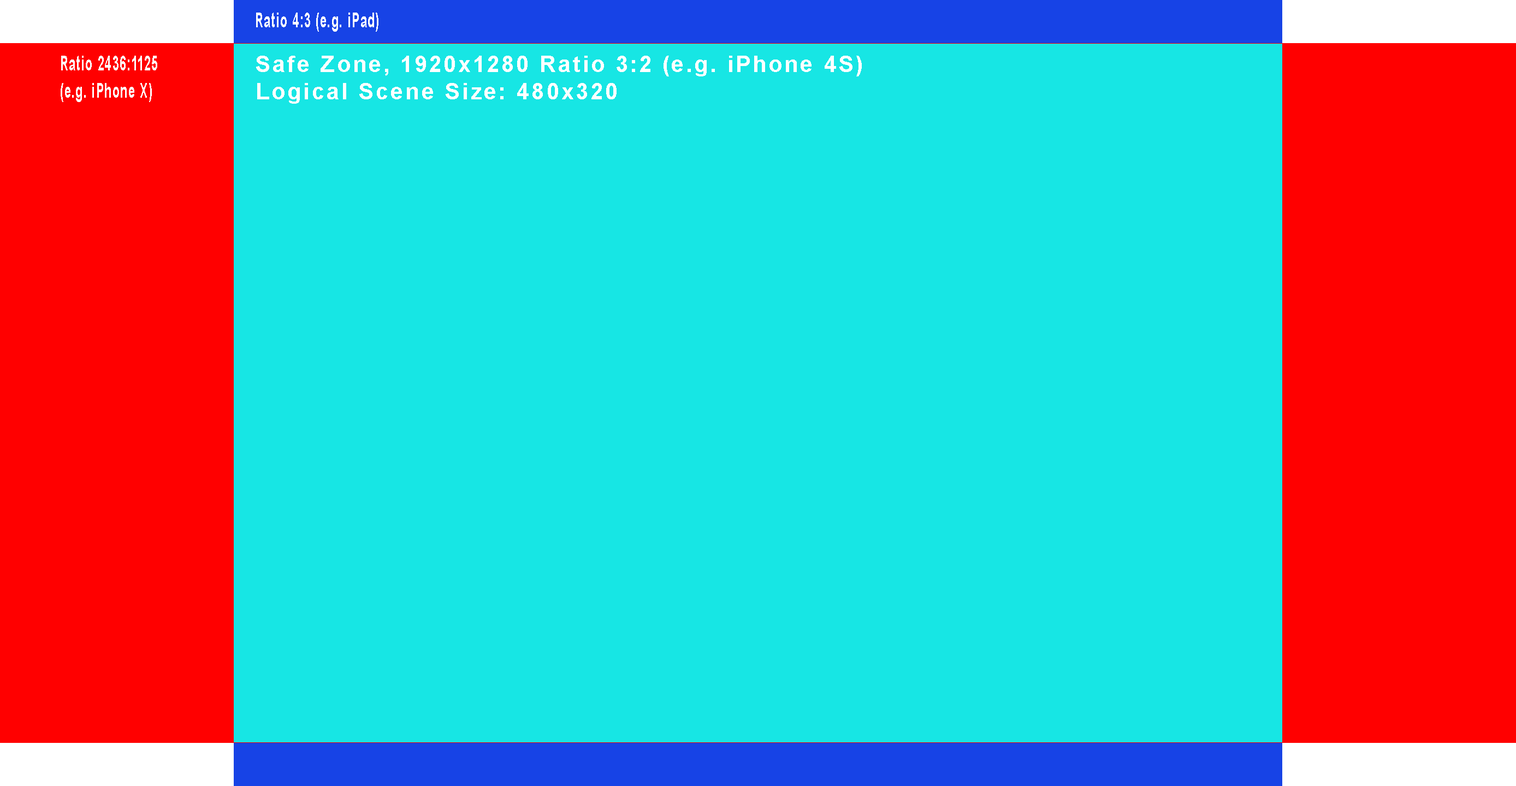
<style>
.page{position:relative;width:1516px;height:786px;background:#17e6e4}
.page>*{position:absolute;margin:0}
.t1{font:20.5px "Arial-BoldMT";letter-spacing:0.1em;color:#ffffff;scale:0.55 1}
.t2{font:22.8px "Arial-BoldMT";letter-spacing:0.1em;color:#ffffff}
</style>
<div class="page">
<p class="t1" style="left:256px;top:13px;width:122px;height:19px">Ratio 4:3 (e.g. iPad)</p>
<p class="t1" style="left:61px;top:56px;width:96px;height:46px">Ratio 2436:1125<br>(e.g. iPhone X)</p>
<p class="t2" style="left:256px;top:56px;width:606px;height:48px">Safe Zone, 1920x1280 Ratio 3:2 (e.g. iPhone 4S)<br>Logical Scene Size: 480x320</p>
</div>
